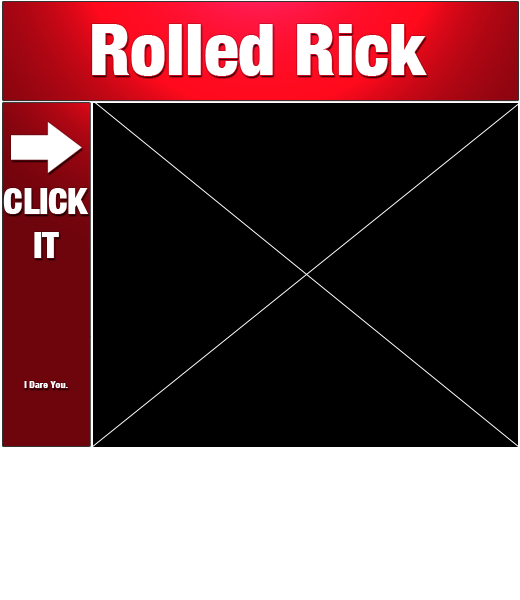
<style>
.page{position:relative;width:520px;height:600px;background:#000000}
.page>*{position:absolute;margin:0}
.t1{font:72px "HelveticaNeue-CondensedBlack";color:#ffffff}
.t2{font:36.5px "HelveticaNeue-CondensedBlack";letter-spacing:-0.01em;color:#ffffff}
.t3{font:9.7px "HelveticaNeue-CondensedBlack";color:#ffffff}
</style>
<div class="page">
<p class="t1" style="left:92px;top:24px;width:335px;height:52px">Rolled Rick</p>
<p class="t2" style="left:3px;top:188px;width:86px;height:70px;text-align:center">CLICK<br>IT</p>
<p class="t3" style="left:24px;top:381px;width:44px;height:7px">I Dare You.</p>
</div>
